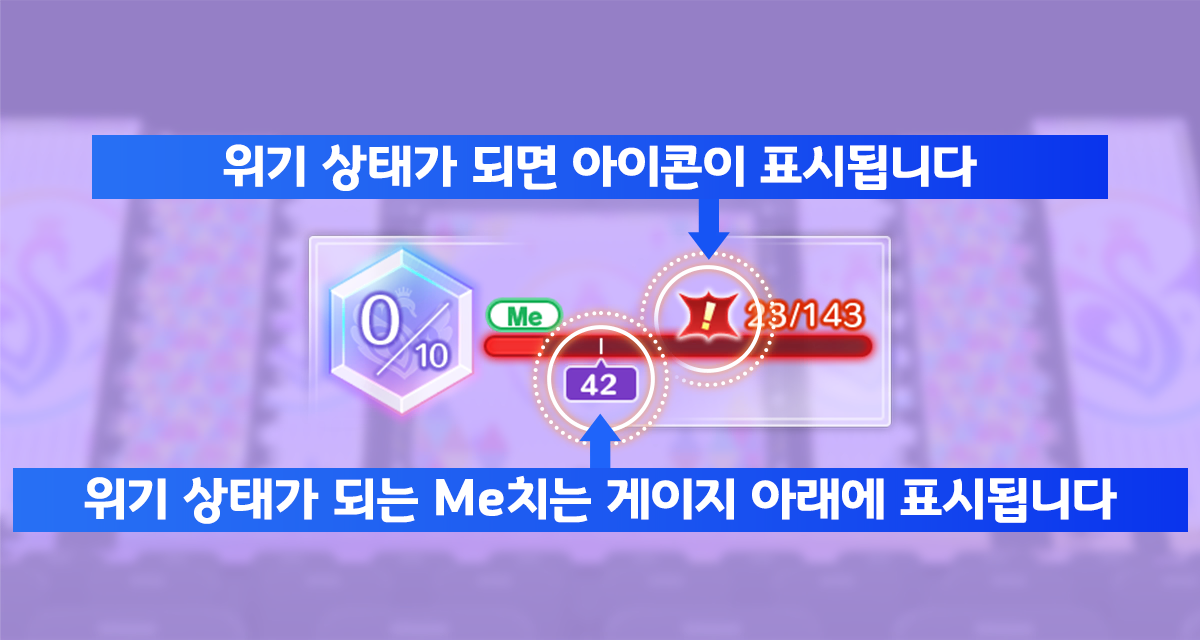
<style>
.page{position:relative;width:1200px;height:640px}
.page>*{position:absolute;margin:0}
.t1{font:50.7px "GyeonggiTitleB";color:#ffffff}
</style>
<div class="page">
<p class="t1" style="left:223px;top:144px;width:754px;height:47px">위기 상태가 되면 아이콘이 표시됩니다</p>
<p class="t1" style="left:84px;top:475px;width:1033px;height:49px">위기 상태가 되는 Me치는 게이지 아래에 표시됩니다</p>
</div>
